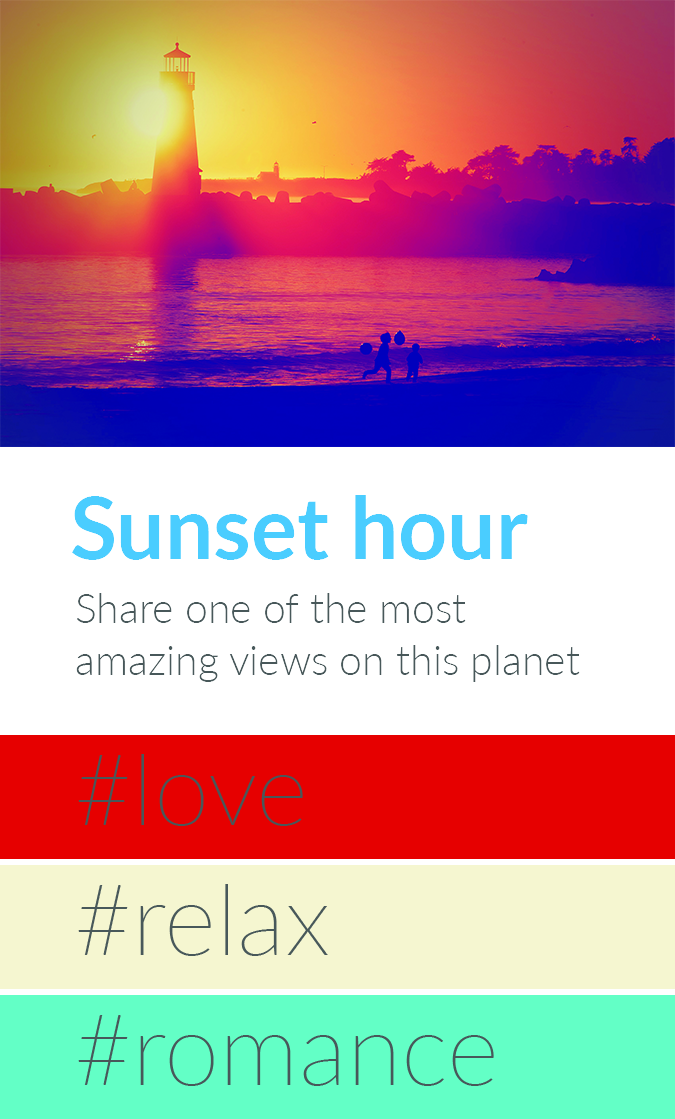
<style>
.page{position:relative;width:675px;height:1119px;background:#ffffff}
.page>*{position:absolute;margin:0}
.t1{font:86px "Lato-Bold";color:#4acdff}
.t2{font:41px/52px "Lato-Light";color:#48585a}
</style>
<div class="page">
<p class="t1" style="left:72px;top:495px;width:456px;height:65px">Sunset hour</p>
<p class="t2" style="left:76px;top:593px;width:504px;height:89px;text-align:right">Share one of the most amazing views on this planet</p>
</div>
